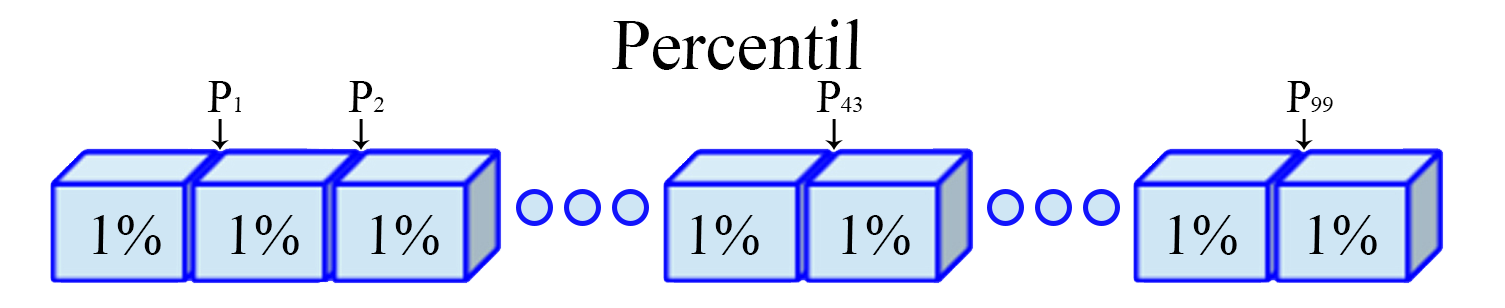
<style>
.page{position:relative;width:1505px;height:308px;background:#ffffff}
.page>*{position:absolute;margin:0}
.t1{font:71.6px "TimesNewRomanPSMT";color:#000000;font-style:italic}
.t2{font:45.4px "TimesNewRomanPSMT";color:#000000;font-style:italic}
.t3{font:22.8px "TimesNewRomanPSMT";color:#000000;font-style:italic}
.t4{font:57.5px "TimesNewRomanPSMT";color:#000000;font-style:italic}
</style>
<div class="page">
<p class="t1" style="left:612px;top:19px;width:250px;height:51px">Percentil</p>
<p class="t2" style="left:207px;top:81px;width:34px;height:31px">P<span class="t3">1</span></p>
<p class="t2" style="left:348px;top:81px;width:36px;height:31px">P<span class="t3">2</span></p>
<p class="t3" style="left:816px;top:81px;width:46px;height:31px"><span class="t2">P</span>43</p>
<p class="t3" style="left:1286px;top:81px;width:47px;height:31px"><span class="t2">P</span>99</p>
<p class="t4" style="left:93px;top:215px;width:68px;height:40px">1%</p>
<p class="t4" style="left:231px;top:215px;width:68px;height:40px">1%</p>
<p class="t4" style="left:371px;top:215px;width:68px;height:40px">1%</p>
<p class="t4" style="left:691px;top:215px;width:68px;height:40px">1%</p>
<p class="t4" style="left:842px;top:215px;width:68px;height:40px">1%</p>
<p class="t4" style="left:1169px;top:215px;width:68px;height:40px">1%</p>
<p class="t4" style="left:1309px;top:215px;width:68px;height:40px">1%</p>
</div>
